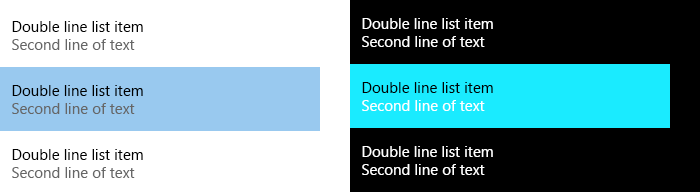
<style>
.page{position:relative;width:700px;height:192px;background:#ffffff}
.page>*{position:absolute;margin:0}
.t1{font:15px "SegoeUI";color:#000000}
.t2{font:15px "SegoeUI";color:#666666}
.t3{font:15px "SegoeUI";color:#ffffff}
.t4{font:15px "SegoeUI";color:#010101}
</style>
<div class="page">
<p class="t1" style="left:12px;top:21px;width:131px;height:29px">Double line list item<br><span class="t2">Second line of text</span></p>
<p class="t3" style="left:362px;top:18px;width:131px;height:29px">Double line list item<br>Second line of text</p>
<p class="t1" style="left:12px;top:85px;width:131px;height:29px">Double line list item<br><span class="t2">Second line of text</span></p>
<p class="t4" style="left:362px;top:82px;width:131px;height:29px">Double line list item<br><span class="t3">Second line of text</span></p>
<p class="t1" style="left:12px;top:149px;width:131px;height:29px">Double line list item<br><span class="t2">Second line of text</span></p>
<p class="t3" style="left:362px;top:146px;width:131px;height:29px">Double line list item<br>Second line of text</p>
</div>
